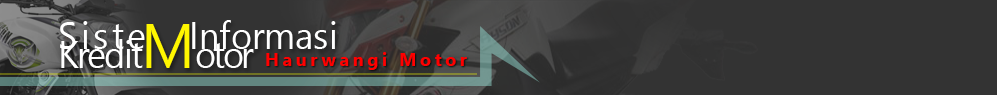
<style>
.page{position:relative;width:997px;height:95px;background:#333333}
.page>*{position:absolute;margin:0}
.t1{font:37.6px/18.8px "SegoeUI";color:#ffffff;scale:0.96 1}
.t2{font:37.6px/18.8px "SegoeUI";letter-spacing:0.1em;color:#ffffff;scale:0.96 1}
.t3{font:37.6px/18.8px "SegoeUI";letter-spacing:-0.05em;color:#ffffff;scale:0.96 1}
.t4{font:62.6px/8.4px "SegoeUI";color:#fff600;scale:0.96 1}
.t5{font:37.6px/8.4px "SegoeUI";letter-spacing:-0.075em;color:#ffffff;scale:0.96 1}
.t6{font:18px "SegoeUI-Bold";letter-spacing:0.2em;color:#ff0000}
</style>
<div class="page">
<p class="t1" style="left:60px;top:20px;width:276px;height:48px"><span class="t2">Siste</span>    Informasi <br><span class="t3">Kredit</span><span class="t4">M</span><span class="t5">otor</span></p>
<p class="t6" style="left:266px;top:52px;width:201px;height:18px">Haurwangi Motor</p>
</div>
